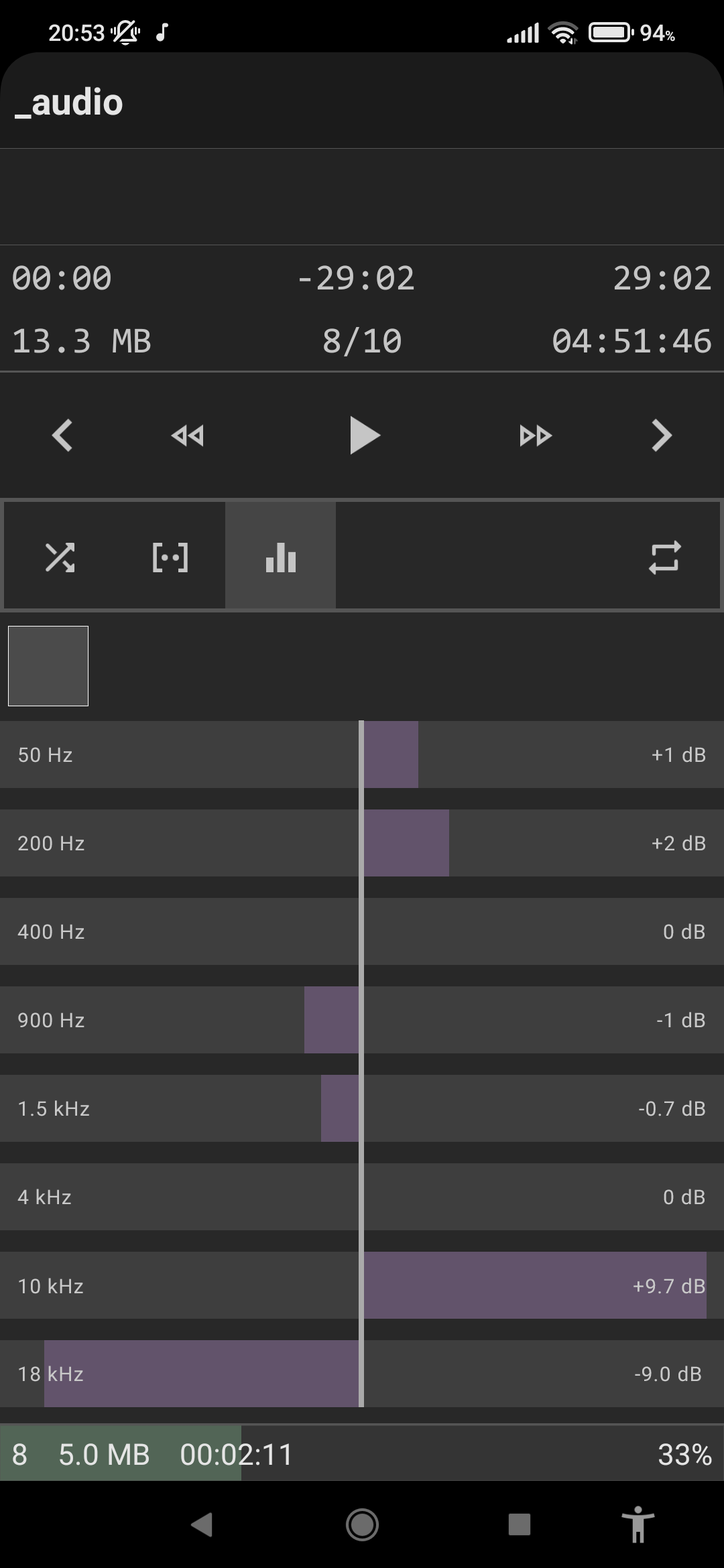
<style>
.page{position:relative;width:724px;height:1568px;background:#3e3e3e}
.page>*{position:absolute;margin:0}
.t1{font:20.1px "Roboto-Regular";letter-spacing:0.04em;color:#c9c9c9}
</style>
<div class="page">
<p class="t1" style="left:19px;top:747px;width:53px;height:16px">50 Hz</p>
<p class="t1" style="left:652px;top:746px;width:53px;height:17px">+1 dB</p>
<p class="t1" style="left:18px;top:836px;width:66px;height:15px">200 Hz</p>
<p class="t1" style="left:652px;top:835px;width:53px;height:16px">+2 dB</p>
<p class="t1" style="left:17px;top:924px;width:67px;height:15px">400 Hz</p>
<p class="t1" style="left:663px;top:923px;width:41px;height:16px">0 dB</p>
<p class="t1" style="left:18px;top:1012px;width:66px;height:16px">900 Hz</p>
<p class="t1" style="left:657px;top:1012px;width:48px;height:16px">-1 dB</p>
<p class="t1" style="left:19px;top:1100px;width:70px;height:16px">1.5 kHz</p>
<p class="t1" style="left:639px;top:1100px;width:66px;height:16px">-0.7 dB</p>
<p class="t1" style="left:17px;top:1189px;width:54px;height:15px">4 kHz</p>
<p class="t1" style="left:663px;top:1189px;width:41px;height:16px">0 dB</p>
<p class="t1" style="left:19px;top:1278px;width:64px;height:16px">10 kHz</p>
<p class="t1" style="left:633px;top:1278px;width:72px;height:16px">+9.7 dB</p>
<p class="t1" style="left:19px;top:1366px;width:64px;height:16px">18 kHz</p>
<p class="t1" style="left:635px;top:1366px;width:66px;height:16px">-9.0 dB</p>
</div>
